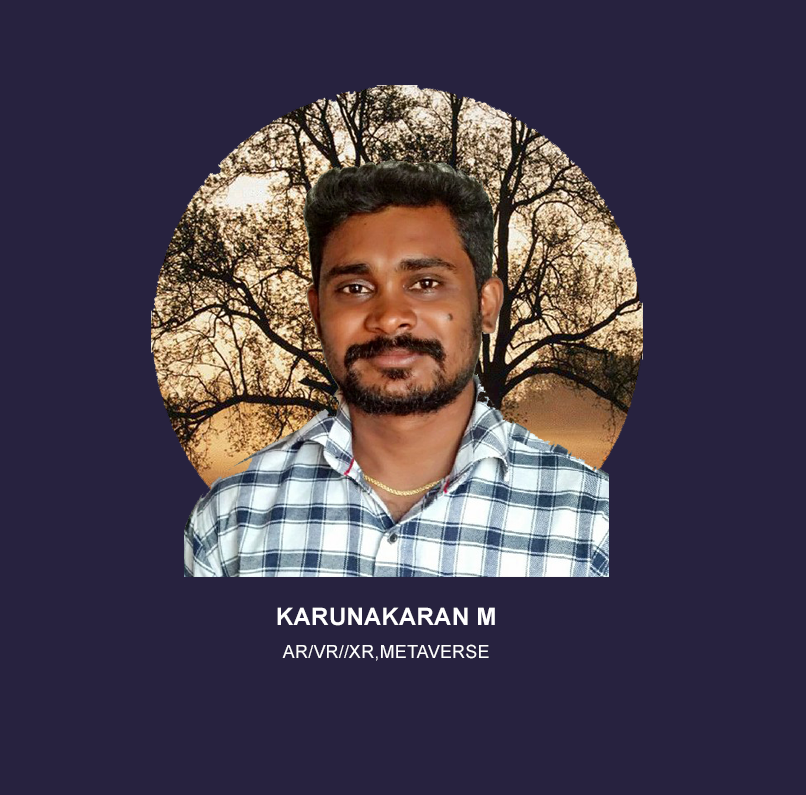
<style>
.page{position:relative;width:806px;height:795px;background:#27223f}
.page>*{position:absolute;margin:0}
.t1{font:24px "Arial-BoldMT";letter-spacing:0.01em;color:#ffffff}
.t2{font:18px "ArialMT";letter-spacing:0.01em;color:#ffffff}
</style>
<div class="page">
<p class="t1" style="left:277px;top:607px;width:218px;height:19px">KARUNAKARAN M</p>
<p class="t2" style="left:282px;top:644px;width:207px;height:17px">AR/VR//XR,METAVERSE</p>
</div>
